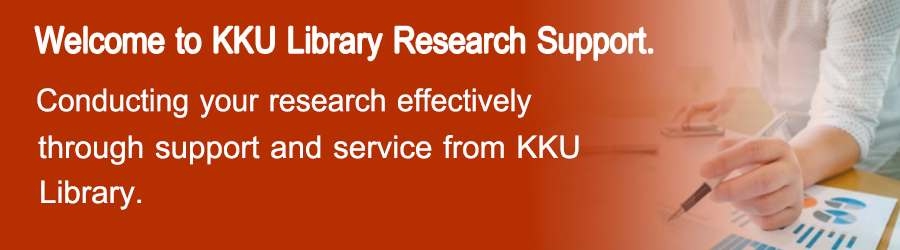
<style>
.page{position:relative;width:900px;height:250px;background:#b52f00}
.page>*{position:absolute;margin:0}
.t1{font:55.2px "DSNSuRaDej";color:#ffffff;scale:0.87 1}
.t2{font:48px "DSNSuRaDej";color:#ffffff;scale:0.97 1}
.t3{font:48px "DSNSuRaDej";color:#ffffff}
</style>
<div class="page">
<p class="t1" style="left:35px;top:26px;width:618px;height:35px">Welcome to KKU Library Research Support.</p>
<p class="t2" style="left:37px;top:88px;width:495px;height:30px">Conducting your research effectively</p>
<p class="t3" style="left:38px;top:135px;width:541px;height:30px">through support and service from KKU</p>
<p class="t3" style="left:41px;top:180px;width:100px;height:30px">Library.</p>
</div>
